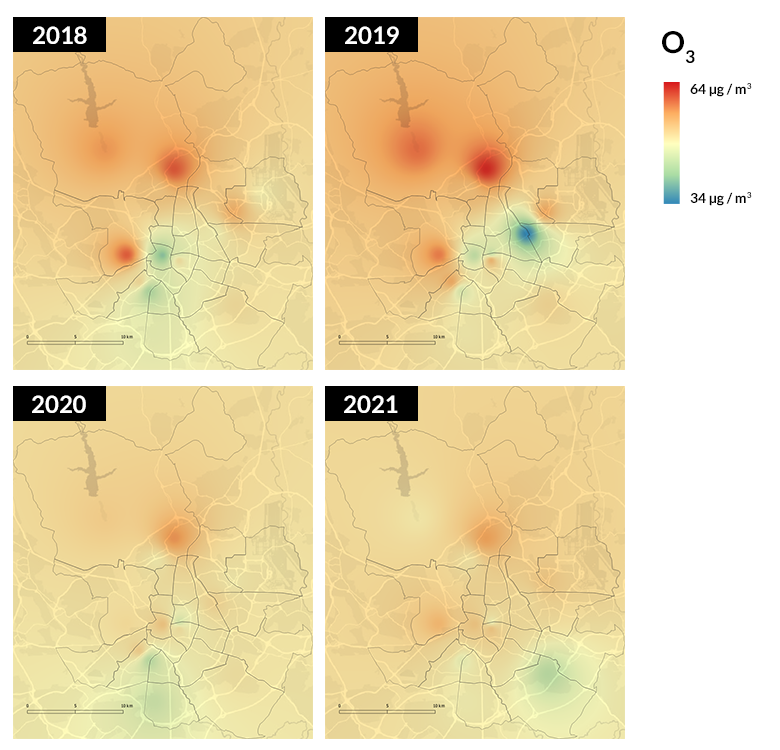
<style>
.page{position:relative;width:780px;height:750px;background:#ffffff}
.page>*{position:absolute;margin:0}
.t1{font:24px "Lato-Bold";color:#ffffff}
.t2{font:30px "Lato-Bold";color:#000000}
.t3{font:14px "Lato-Bold";color:#000000}
</style>
<div class="page">
<p class="t1" style="left:33px;top:26px;width:54px;height:18px">2018</p>
<p class="t1" style="left:345px;top:26px;width:54px;height:18px">2019</p>
<p class="t2" style="left:662px;top:31px;width:33px;height:32px">O3</p>
<p class="t3" style="left:690px;top:83px;width:62px;height:14px">64 μg / m3</p>
<p class="t3" style="left:690px;top:192px;width:62px;height:14px">34 μg / m3</p>
<p class="t1" style="left:32px;top:395px;width:54px;height:18px">2020</p>
<p class="t1" style="left:344px;top:395px;width:54px;height:18px">2021</p>
</div>
